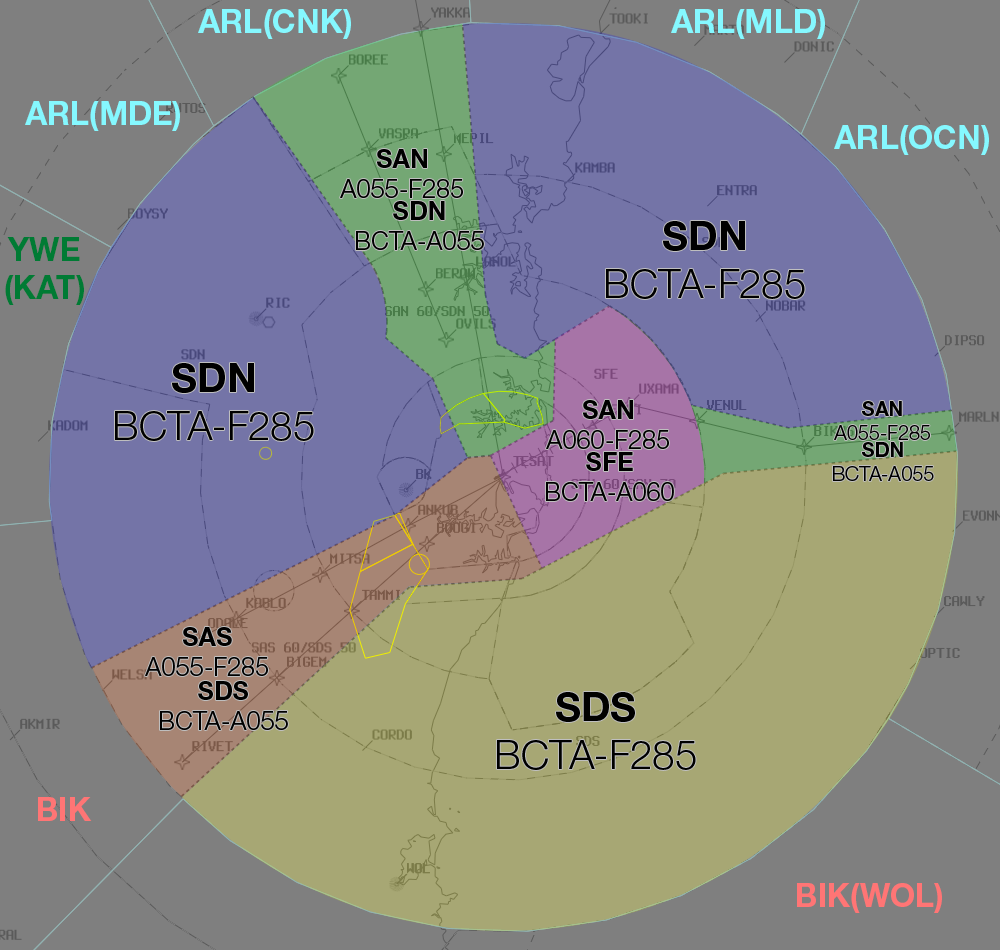
<style>
.page{position:relative;width:1000px;height:950px;background:#7f7f7f}
.page>*{position:absolute;margin:0}
.t1{font:32.2px "HelveticaNeueLTStd-Bd";color:#85f8ff}
.t2{font:25.3px "HelveticaNeueLTStd-Lt";color:#000000}
.t3{font:25.3px "HelveticaNeueLTStd-Bd";color:#000000}
.t4{font:40px "HelveticaNeueLTStd-Lt";color:#000000}
.t5{font:40px "HelveticaNeueLTStd-Bd";color:#000000}
.t6{font:32.2px "HelveticaNeueLTStd-Bd";color:#007b34}
.t7{font:19.9px "HelveticaNeueLTStd-Lt";color:#000000}
.t8{font:19.9px "HelveticaNeueLTStd-Bd";color:#000000}
.t9{font:32.2px "HelveticaNeueLTStd-Bd";color:#ff7575}
</style>
<div class="page">
<p class="t1" style="left:198px;top:9px;width:153px;height:30px">ARL(CNK)</p>
<p class="t1" style="left:671px;top:9px;width:154px;height:30px">ARL(MLD)</p>
<p class="t1" style="left:25px;top:101px;width:155px;height:30px">ARL(MDE)</p>
<p class="t1" style="left:834px;top:125px;width:155px;height:30px">ARL(OCN)</p>
<p class="t2" style="left:340px;top:149px;width:123px;height:49px;text-align:center"><span class="t3">SAN<br></span>A055-F285</p>
<p class="t2" style="left:356px;top:201px;width:128px;height:49px;text-align:center"><span class="t3">SDN<br></span>BCTA-A055</p>
<p class="t4" style="left:606px;top:221px;width:199px;height:78px;text-align:center"><span class="t5">SDN<br></span>BCTA-F285</p>
<p class="t6" style="left:5px;top:237px;width:79px;height:68px;text-align:center">YWE<br>(KAT)</p>
<p class="t4" style="left:115px;top:363px;width:199px;height:78px;text-align:center"><span class="t5">SDN<br></span>BCTA-F285</p>
<p class="t2" style="left:546px;top:400px;width:123px;height:49px;text-align:center"><span class="t3">SAN<br></span>A060-F285</p>
<p class="t7" style="left:834px;top:401px;width:96px;height:39px;text-align:center"><span class="t8">SAN<br></span>A055-F285</p>
<p class="t7" style="left:833px;top:442px;width:101px;height:39px;text-align:center"><span class="t8">SDN<br></span>BCTA-A055</p>
<p class="t2" style="left:546px;top:452px;width:128px;height:49px;text-align:center"><span class="t3">SFE<br></span>BCTA-A060</p>
<p class="t2" style="left:145px;top:627px;width:123px;height:49px;text-align:center"><span class="t3">SAS<br></span>A055-F285</p>
<p class="t2" style="left:160px;top:681px;width:128px;height:49px;text-align:center"><span class="t3">SDS<br></span>BCTA-A055</p>
<p class="t4" style="left:497px;top:692px;width:199px;height:78px;text-align:center"><span class="t5">SDS<br></span>BCTA-F285</p>
<p class="t9" style="left:38px;top:797px;width:54px;height:24px">BIK</p>
<p class="t9" style="left:797px;top:883px;width:145px;height:30px">BIK(WOL)</p>
</div>
